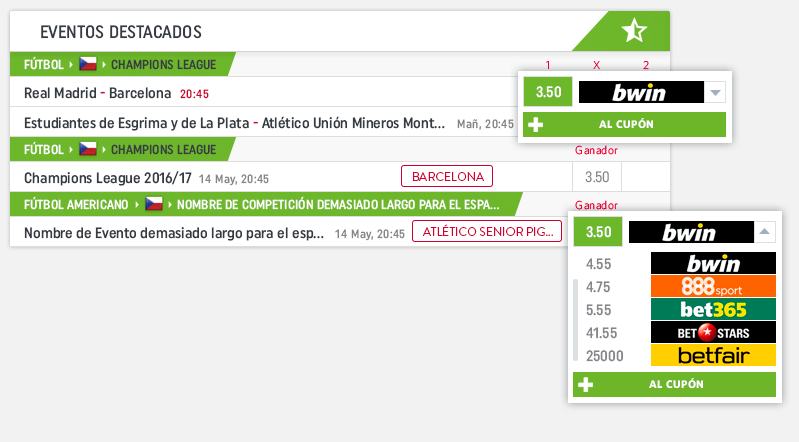
<style>
.page{position:relative;width:799px;height:442px;background:#f2f2f2}
.page>*{position:absolute;margin:0}
.t1{font:18px "UniformCondensed-Medium";color:#363b42}
.t2{font:13px "UniformCondensed-Medium";color:#ffffff}
.t3{font:13px "UniformCondensed-Medium";color:#363b42}
.t4{font:11.5px "Whitney-Light";letter-spacing:0.025em;color:#ec0031}
.t5{font:11.5px "Whitney-Light";letter-spacing:0.025em;color:#f10032}
.t6{font:11.5px "Whitney-Light";letter-spacing:0.025em}
.t7{font:15px "UniformCondensed-Medium";color:#363b42}
.t8{font:15px "UniformCondensed-Medium";color:#d40336}
.t9{font:12px "UniformCondensed-Medium";letter-spacing:0.04em;color:#cf0034}
.t10{font:15px "UniformCondensed"}
.t11{font:15px "UniformCondensed-Medium";color:#ffffff}
.t12{font:12px "UniformCondensed-Medium";letter-spacing:0.04em;color:#848589}
.t13{font:11px "Whitney-Bold";letter-spacing:0.039em;color:#ffffff;text-transform:uppercase}
.t14{font:11.5px "Whitney-Light";letter-spacing:0.025em;color:#f30033}
.t15{font:12px "BrandonGrotesque-Regular";color:#cf0034;text-transform:uppercase}
.t16{font:15px "UniformCondensed";color:#85868a}
.t17{font:11.5px "Whitney-Light";letter-spacing:0.025em;color:#e50030}
.t18{font:15px "UniformCondensed-Medium";color:#85868a}
</style>
<div class="page">
<p class="t1" style="left:41px;top:25px;width:161px;height:14px">EVENTOS DESTACADOS</p>
<p class="t2" style="left:24px;top:56px;width:40px;height:14px">FÚTBOL</p>
<p class="t3" style="left:111px;top:59px;width:105px;height:11px">CHAMPIONS LEAGUE</p>
<p class="t4" style="left:546px;top:61px;width:3px;height:9px">1</p>
<p class="t5" style="left:593px;top:61px;width:7px;height:9px">X</p>
<p class="t6" style="left:643px;top:61px;width:6px;height:9px">2</p>
<p class="t7" style="left:24px;top:87px;width:147px;height:12px">Real Madrid <span class="t8">- </span>Barcelona</p>
<p class="t9" style="left:180px;top:89px;width:29px;height:10px">20:45</p>
<p class="t10" style="left:535px;top:86px;width:25px;height:12px">2.55</p>
<p class="t11" style="left:536px;top:86px;width:25px;height:12px">3.50</p>
<p class="t7" style="left:24px;top:116px;width:421px;height:15px">Estudiantes de Esgrima y de La Plata <span class="t8">- </span>Atlético Unión Mineros Mont...</p>
<p class="t12" style="left:457px;top:119px;width:57px;height:11px">Mañ, 20:45</p>
<p class="t13" style="left:599px;top:118px;width:54px;height:11px">al cupón</p>
<p class="t2" style="left:24px;top:141px;width:40px;height:14px">FÚTBOL</p>
<p class="t3" style="left:111px;top:144px;width:105px;height:11px">CHAMPIONS LEAGUE</p>
<p class="t14" style="left:575px;top:145px;width:43px;height:10px">Ganador</p>
<p class="t7" style="left:24px;top:171px;width:168px;height:15px">Champions League 2016/17</p>
<p class="t12" style="left:199px;top:174px;width:70px;height:12px">14 May, 20:45</p>
<p class="t15" style="left:413px;top:172px;width:71px;height:9px">barcelona</p>
<p class="t16" style="left:585px;top:171px;width:24px;height:12px">3.50</p>
<p class="t2" style="left:24px;top:196px;width:104px;height:14px">FÚTBOL AMERICANO</p>
<p class="t2" style="left:177px;top:196px;width:322px;height:14px">NOMBRE DE COMPETICIÓN DEMASIADO LARGO PARA EL ESPA...</p>
<p class="t17" style="left:575px;top:200px;width:43px;height:10px">Ganador</p>
<p class="t7" style="left:24px;top:227px;width:300px;height:14px">Nombre de Evento demasiado largo para el esp...</p>
<p class="t12" style="left:335px;top:229px;width:70px;height:12px">14 May, 20:45</p>
<p class="t15" style="left:423px;top:224px;width:130px;height:12px">ATLÉTICO SENIOR PIG...</p>
<p class="t11" style="left:586px;top:226px;width:25px;height:12px">3.50</p>
<p class="t18" style="left:586px;top:258px;width:25px;height:12px">4.55</p>
<p class="t18" style="left:586px;top:281px;width:24px;height:12px">4.75</p>
<p class="t18" style="left:586px;top:304px;width:25px;height:12px">5.55</p>
<p class="t18" style="left:586px;top:327px;width:31px;height:12px">41.55</p>
<p class="t18" style="left:586px;top:350px;width:37px;height:12px">25000</p>
<p class="t13" style="left:649px;top:378px;width:54px;height:11px">al cupón</p>
</div>
